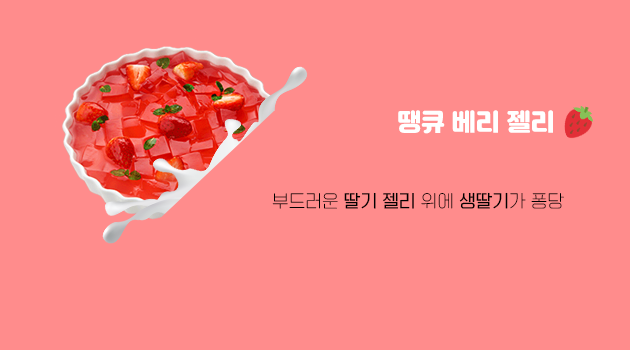
<style>
.page{position:relative;width:630px;height:350px;background:#ff8c8c}
.page>*{position:absolute;margin:0}
.t1{font:24px "Jalnan";color:#ffffff}
.t2{font:17px "TTOmniGothicM";color:#000000}
.t3{font:17px "TTOmniGothicT";color:#000000}
</style>
<div class="page">
<p class="t1" style="left:398px;top:110px;width:155px;height:24px">땡큐 베리 젤리</p>
<p class="t2" style="left:272px;top:192px;width:292px;height:17px"><span class="t3">부드러운 </span>딸기 젤리<span class="t3"> 위에 </span>생딸기<span class="t3">가 퐁당</span></p>
</div>
